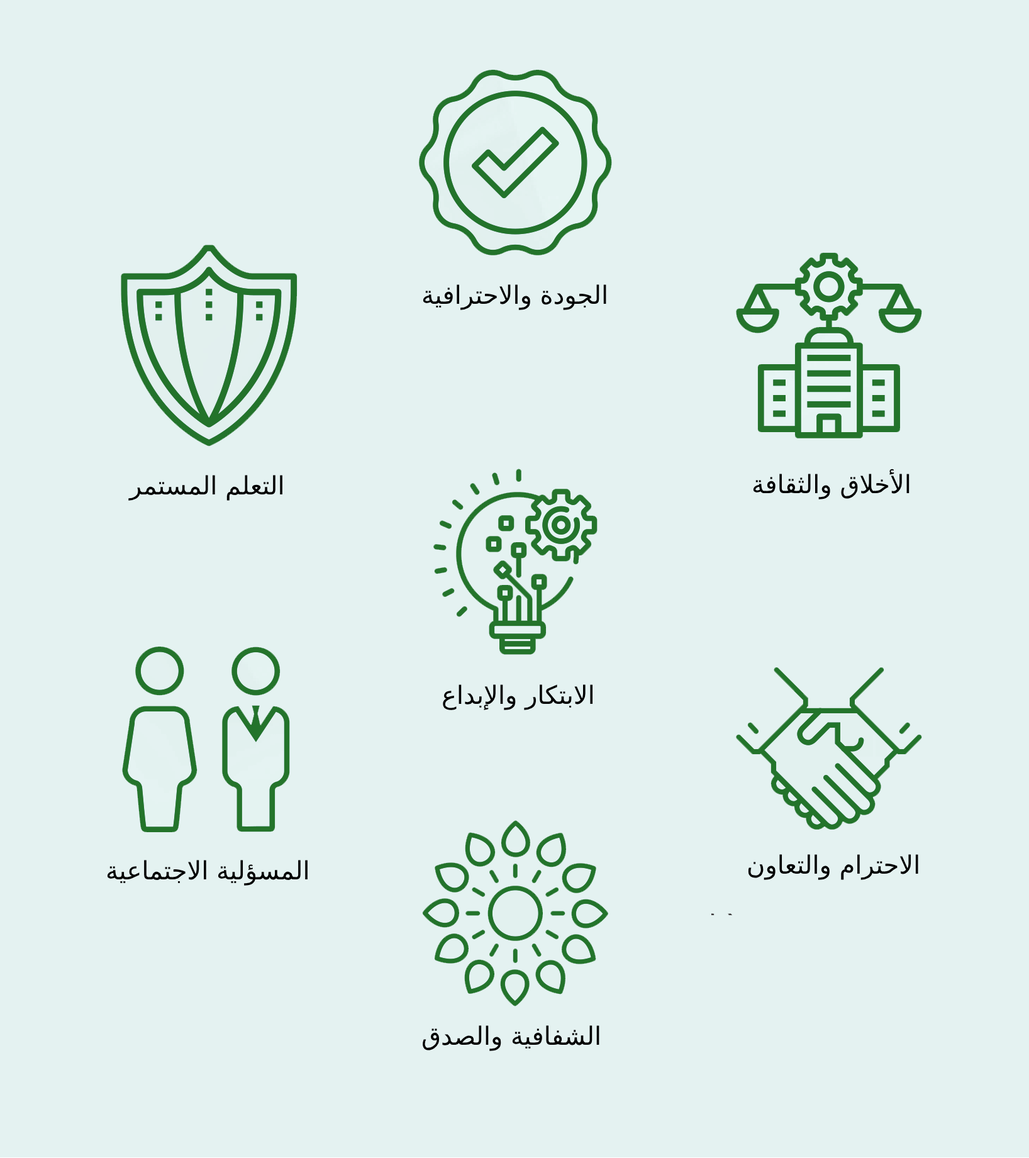
<style>
.page{position:relative;width:1029px;height:1158px;background:#e4f2f1}
.page>*{position:absolute;margin:0}
.t1{font:25.2px "DejaVuSans";color:#000000}
</style>
<div class="page">
<p class="t1" style="left:423px;top:284px;width:184px;height:26px">الجودة والاحترافية</p>
<p class="t1" style="left:753px;top:469px;width:157px;height:31px">الأخلاق والثقافة</p>
<p class="t1" style="left:128px;top:475px;width:155px;height:26px">التعلم المستمر</p>
<p class="t1" style="left:443px;top:685px;width:150px;height:25px">الابتكار والإبداع</p>
<p class="t1" style="left:748px;top:854px;width:171px;height:26px">الاحترام والتعاون</p>
<p class="t1" style="left:107px;top:860px;width:201px;height:26px">المسؤلية الاجتماعية</p>
</div>
